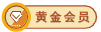
<style>
.page{position:relative;width:101px;height:32px;background:#ffffff}
.page>*{position:absolute;margin:0}
.t1{font:12px "SimHei";letter-spacing:0.2em;color:#ad4e26;font-weight:bold}
</style>
<div class="page">
<p class="t1" style="left:35px;top:11px;width:55px;height:12px">黄金会员</p>
</div>
